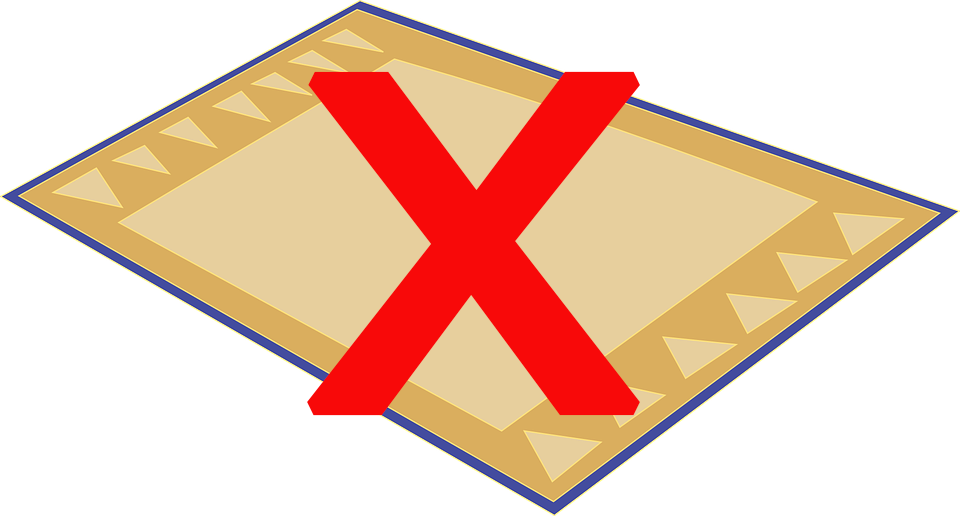
<style>
.page{position:relative;width:960px;height:516px;background:#ffffff}
.page>*{position:absolute;margin:0}
.t1{font:600px "Verdana";color:#f80909;font-weight:bold}
</style>
<div class="page">
<p class="t1" style="left:307px;top:71px;width:333px;height:345px">x</p>
</div>
